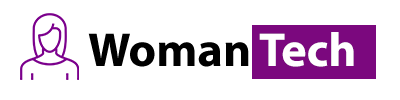
<style>
.page{position:relative;width:400px;height:100px;background:#ffffff}
.page>*{position:absolute;margin:0}
.t1{font:48px "MyriadPro-Bold";color:#000000}
.t2{font:48px "MyriadPro-Bold";color:#ffffff}
</style>
<div class="page">
<p class="t1" style="left:88px;top:32px;width:266px;height:35px">Woman <span class="t2">Tech</span></p>
</div>
